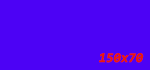
<style>
.page{position:relative;width:150px;height:70px;background:#4c02f5}
.page>*{position:absolute;margin:0}
.t1{font:13.5px "Consolas-Bold";color:#e9180c;font-weight:bold;font-style:italic;scale:0.95 1}
</style>
<div class="page">
<p class="t1" style="left:99px;top:53px;width:45px;height:10px">150x70</p>
</div>
